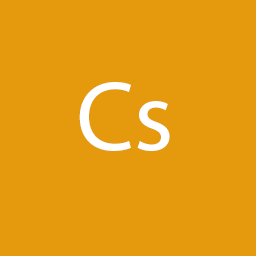
<style>
.page{position:relative;width:256px;height:256px;background:#e49a0c}
.page>*{position:absolute;margin:0}
.t1{font:100px "MyriadPro-Regular";color:#ffffff}
</style>
<div class="page">
<p class="t1" style="left:79px;top:82px;width:91px;height:69px">Cs</p>
</div>
